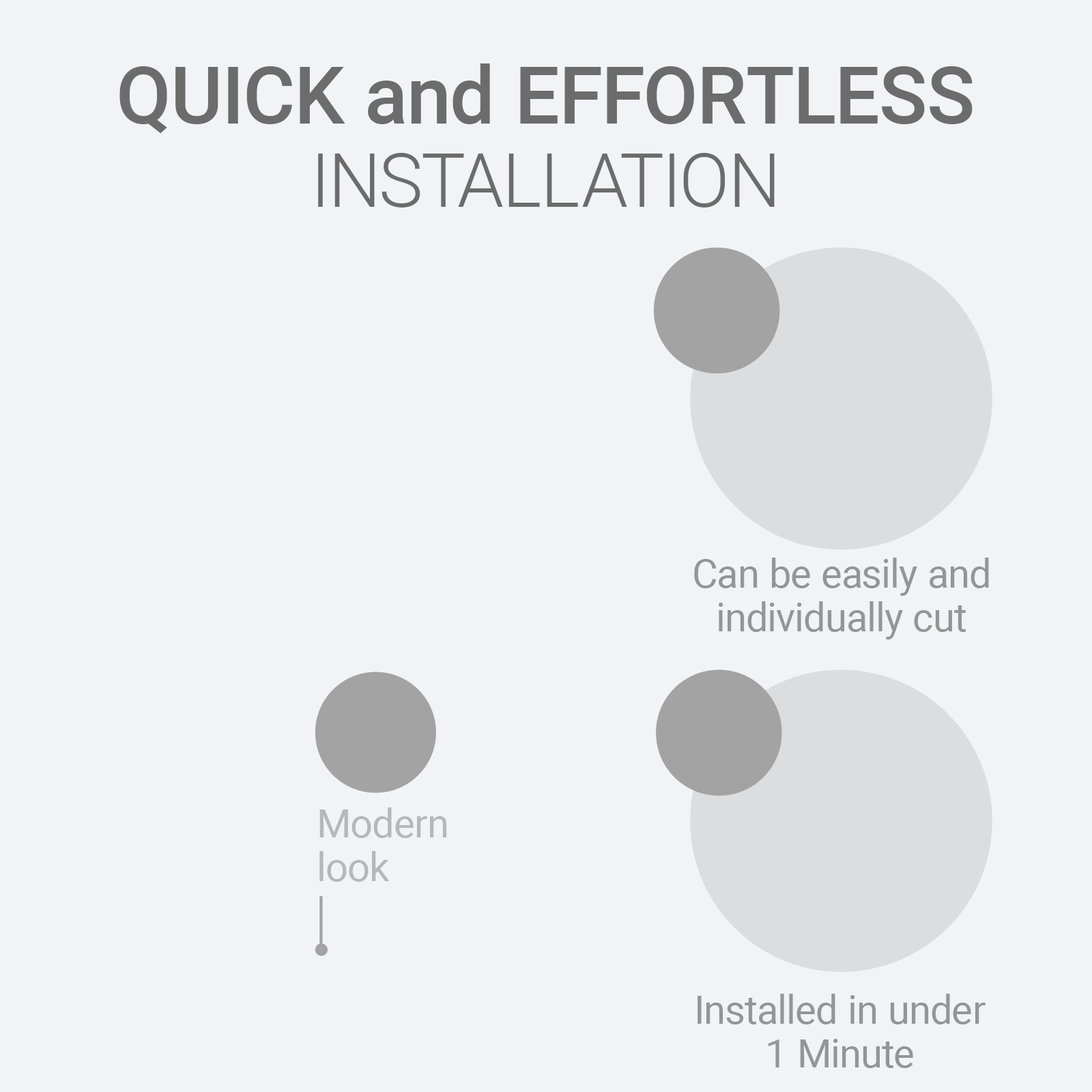
<style>
.page{position:relative;width:1092px;height:1092px;background:#f2f3f6}
.page>*{position:absolute;margin:0}
.t1{font:80.1px "Roboto-Medium";color:#6c6c6c}
.t2{font:74.3px "Roboto-Light";color:#6c6c6c}
.t3{font:39.3px/43.7px "Roboto-Regular";color:#949596}
.t4{font:39.3px/43.7px "Roboto-Regular";color:#b6b7b9}
</style>
<div class="page">
<p class="t1" style="left:119px;top:63px;width:854px;height:71px">QUICK and EFFORTLESS</p>
<p class="t2" style="left:318px;top:153px;width:457px;height:54px">INSTALLATION</p>
<p class="t3" style="left:694px;top:558px;width:295px;height:81px;text-align:center">Can be easily and<br>individually cut</p>
<p class="t4" style="left:319px;top:807px;width:128px;height:75px">Modern<br>look</p>
<p class="t3" style="left:698px;top:994px;width:288px;height:74px;text-align:center">Installed in under<br>1 Minute</p>
</div>
